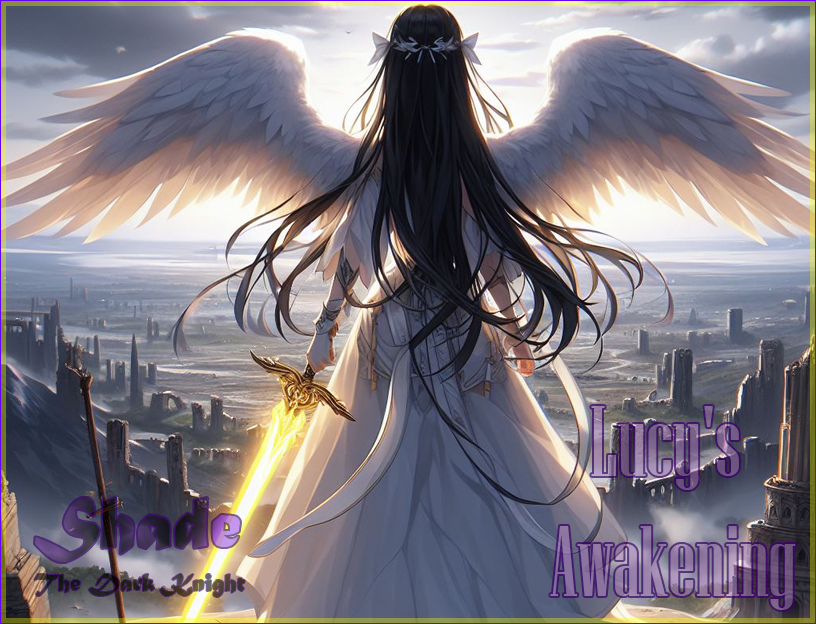
<style>
.page{position:relative;width:816px;height:624px}
.page>*{position:absolute;margin:0}
.t1{font:100px "NiagaraSolid-Reg"}
.t2{font:75px "MaturaMTScriptCapitals"}
.t3{font:25px "MaturaMTScriptCapitals"}
</style>
<div class="page">
<p class="t1" style="left:550px;top:406px;width:246px;height:204px;text-align:center">Lucy's <br>Awakening</p>
<p class="t2" style="left:35px;top:498px;width:205px;height:64px">Shade</p>
<p class="t3" style="left:34px;top:574px;width:211px;height:23px">The Dark Knight</p>
</div>
